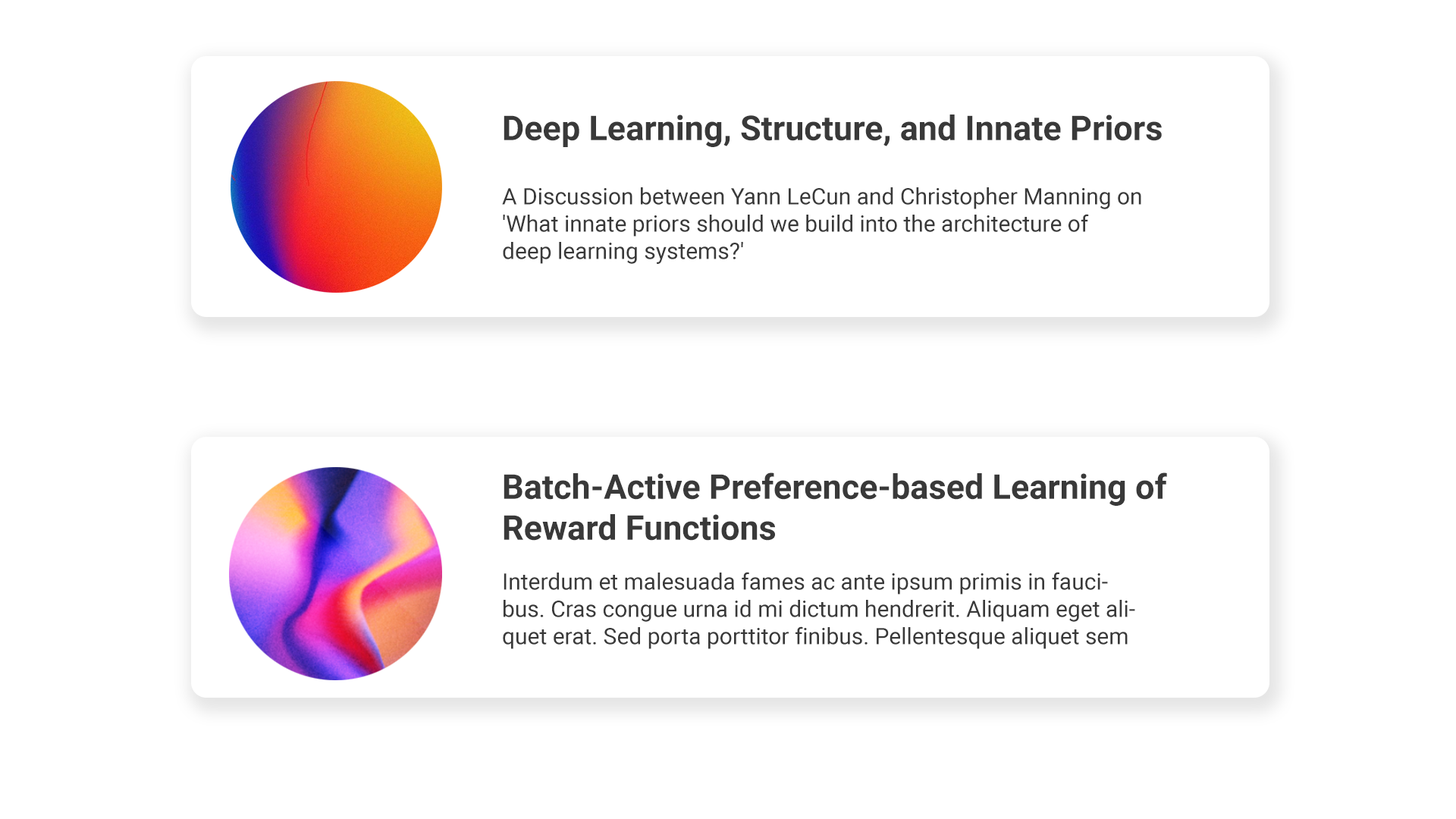
<style>
.page{position:relative;width:1456px;height:819px;background:#ffffff}
.page>*{position:absolute;margin:0}
.t1{font:34.1px "Roboto-Bold";color:#393939}
.t2{font:22.7px "Roboto-Regular";color:#393939}
</style>
<div class="page">
<p class="t1" style="left:504px;top:115px;width:658px;height:32px">Deep Learning, Structure, and Innate Priors</p>
<p class="t2" style="left:502px;top:187px;width:639px;height:77px">A Discussion between Yann LeCun and Christopher Manning on 'What innate priors should we build into the architecture of deep learning systems?'</p>
<p class="t1" style="left:504px;top:472px;width:663px;height:69px">Batch-Active Preference-based Learning of Reward Functions</p>
<p class="t2" style="left:503px;top:572px;width:632px;height:77px">Interdum et malesuada fames ac ante ipsum primis in faucibus. Cras congue urna id mi dictum hendrerit. Aliquam eget aliquet erat. Sed porta porttitor finibus. Pellentesque aliquet sem rutrum pellentesque eleifend.</p>
</div>
